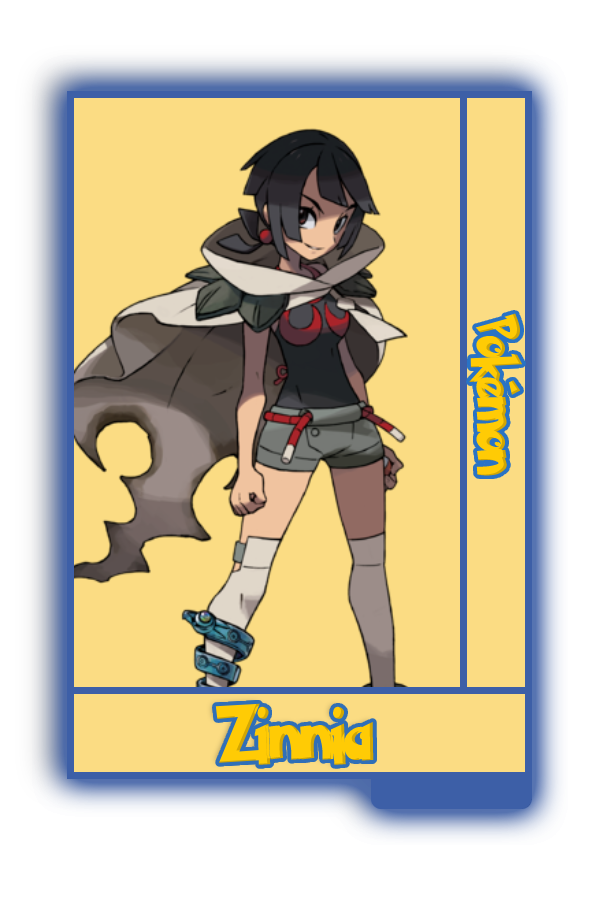
<style>
.page{position:relative;width:600px;height:900px;background:#fbdc83}
.page>*{position:absolute;margin:0}
.t1{font:48.8px "PokemonSolidNormal";color:#ffcb05;scale:0.8 1}
.t2{font:56.6px "PokemonSolidNormal";color:#ffcb05;scale:0.92 1}
</style>
<div class="page">
<p class="t1" style="left:469px;top:313px;width:54px;height:163px;rotate:90deg">Pokémon</p>
<p class="t2" style="left:215px;top:703px;width:159px;height:62px">Zinnia</p>
</div>
